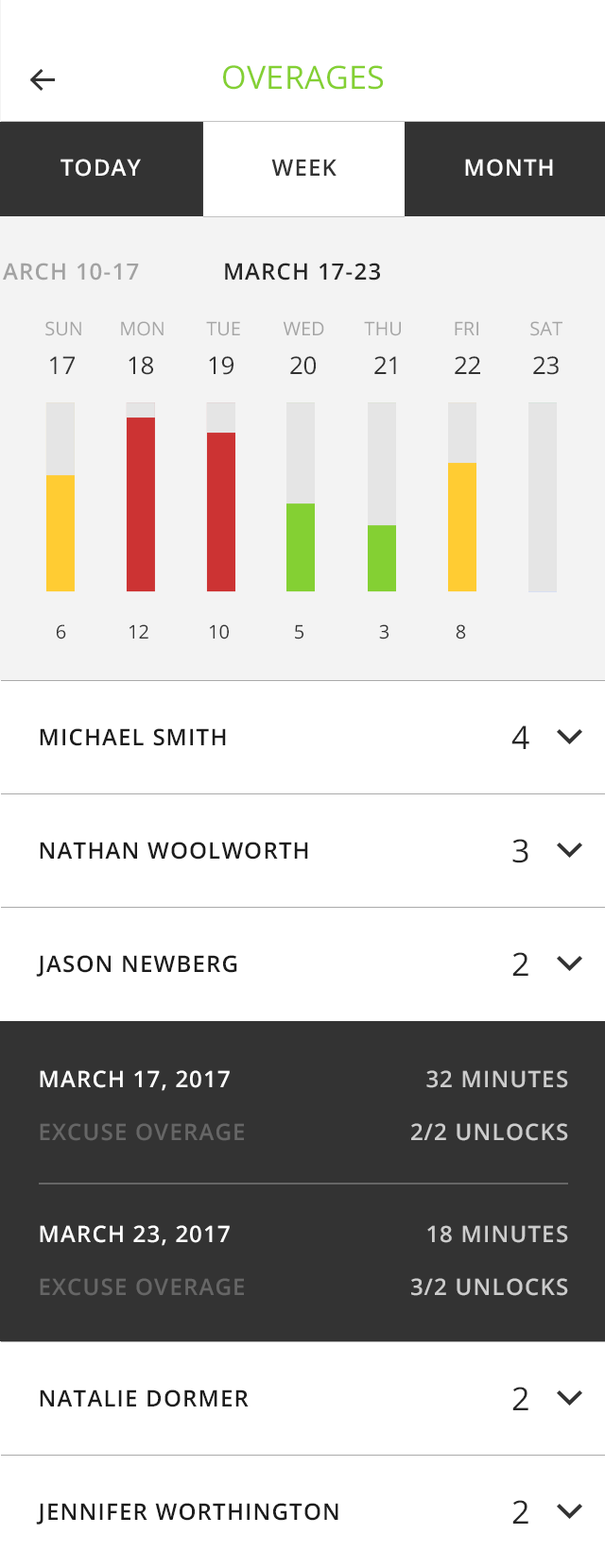
<style>
.page{position:relative;width:605px;height:1568px;background:#ffffff}
.page>*{position:absolute;margin:0}
.t1{font:32.1px "OpenSans";letter-spacing:0.01em;color:#84d033;text-transform:uppercase}
.t2{font:22.7px "OpenSans-Semibold";letter-spacing:0.05em;color:#ffffff;text-transform:uppercase}
.t3{font:22.7px "OpenSans-Semibold";letter-spacing:0.05em;color:#333333;text-transform:uppercase}
.t4{font:22.7px "OpenSans-Semibold";letter-spacing:0.05em;color:#262626;text-transform:uppercase}
.t5{font:18.9px "OpenSans";color:#a5a5a5}
.t6{font:24.4px "OpenSans";color:#333333}
.t7{font:18.9px "OpenSans";color:#333333}
.t8{font:32.1px "OpenSans";color:#262626}
.t9{font:22.7px "OpenSans-Semibold";letter-spacing:0.05em;color:#1c1c1c;text-transform:uppercase}
.t10{font:22.7px/52.9px "OpenSans-Semibold";letter-spacing:0.05em;color:#ffffff;text-transform:uppercase}
.t11{font:22.7px/52.9px "OpenSans-Semibold";letter-spacing:0.05em;color:#666666;text-transform:uppercase}
.t12{font:22.7px/52.9px "OpenSans-Semibold";letter-spacing:0.05em;color:#cccccc;text-transform:uppercase}
</style>
<div class="page">
<p class="t1" style="left:223px;top:65px;width:160px;height:25px">Overages</p>
<p class="t2" style="left:60px;top:159px;width:81px;height:18px">today</p>
<p class="t3" style="left:271px;top:159px;width:65px;height:17px">week</p>
<p class="t2" style="left:465px;top:159px;width:88px;height:18px">month</p>
<p class="t4" style="left:225px;top:263px;width:155px;height:18px">march 17-23</p>
<p class="t5" style="left:45px;top:321px;width:36px;height:15px">SUN</p>
<p class="t5" style="left:121px;top:321px;width:42px;height:15px">MON</p>
<p class="t5" style="left:206px;top:321px;width:34px;height:15px">TUE</p>
<p class="t5" style="left:282px;top:321px;width:42px;height:14px">WED</p>
<p class="t5" style="left:364px;top:321px;width:37px;height:15px">THU</p>
<p class="t5" style="left:454px;top:321px;width:24px;height:14px">FRI</p>
<p class="t5" style="left:530px;top:321px;width:32px;height:15px">SAT</p>
<p class="t6" style="left:50px;top:356px;width:25px;height:18px">17</p>
<p class="t6" style="left:128px;top:356px;width:25px;height:19px">18</p>
<p class="t6" style="left:209px;top:356px;width:24px;height:19px">19</p>
<p class="t6" style="left:290px;top:356px;width:25px;height:19px">20</p>
<p class="t6" style="left:374px;top:356px;width:22px;height:18px">21</p>
<p class="t6" style="left:454px;top:356px;width:26px;height:18px">22</p>
<p class="t6" style="left:533px;top:356px;width:25px;height:19px">23</p>
<p class="t7" style="left:57px;top:624px;width:9px;height:15px">6</p>
<p class="t7" style="left:128px;top:624px;width:20px;height:15px">12</p>
<p class="t7" style="left:209px;top:624px;width:20px;height:15px">10</p>
<p class="t7" style="left:295px;top:624px;width:8px;height:15px">5</p>
<p class="t7" style="left:379px;top:624px;width:9px;height:15px">3</p>
<p class="t7" style="left:455px;top:624px;width:11px;height:15px">8</p>
<p class="t8" style="left:511px;top:725px;width:18px;height:24px">4</p>
<p class="t9" style="left:40px;top:728px;width:186px;height:18px">MICHAEL SMITH</p>
<p class="t9" style="left:40px;top:842px;width:268px;height:18px">NATHAN WOOLWORTH</p>
<p class="t8" style="left:512px;top:839px;width:16px;height:24px">3</p>
<p class="t8" style="left:512px;top:952px;width:16px;height:24px">2</p>
<p class="t9" style="left:36px;top:955px;width:201px;height:22px">JASON NEWBERG</p>
<p class="t10" style="left:40px;top:1070px;width:204px;height:71px">MARCH 17, 2017<br><span class="t11">EXCUSE OVERAGE</span></p>
<p class="t12" style="left:411px;top:1070px;width:157px;height:71px;text-align:right">32 MINUTES <br>2/2 UNLOCKS</p>
<p class="t2" style="left:40px;top:1225px;width:204px;height:71px">MARCH 23, 2017<br><span class="t11">EXCUSE OVERAGE</span></p>
<p class="t12" style="left:411px;top:1225px;width:157px;height:71px;text-align:right">18 MINUTES <br>3/2 UNLOCKS</p>
<p class="t9" style="left:40px;top:1389px;width:208px;height:18px">NATALIE DORMER</p>
<p class="t8" style="left:512px;top:1387px;width:16px;height:23px">2</p>
<p class="t9" style="left:36px;top:1503px;width:302px;height:22px">JENNIFER WORTHINGTON</p>
<p class="t8" style="left:512px;top:1500px;width:16px;height:24px">2</p>
</div>
